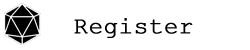
<style>
.page{position:relative;width:250px;height:50px;background:#ffffff}
.page>*{position:absolute;margin:0}
.t1{font:24px "CourierNewPSMT";color:#000000;font-weight:bold}
</style>
<div class="page">
<p class="t1" style="left:74px;top:18px;width:119px;height:20px">Register</p>
</div>
